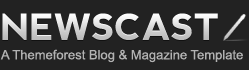
<style>
.page{position:relative;width:249px;height:70px;background:#222222}
.page>*{position:absolute;margin:0}
.t1{font:36px "nevis-Bold";text-transform:uppercase}
.t2{font:13px/24px "ArialMT";color:#b2b2b2}
</style>
<div class="page">
<p class="t1" style="left:2px;top:13px;width:216px;height:27px">Newscast</p>
<p class="t2" style="left:0px;top:49px;width:243px;height:14px">A Themeforest Blog &amp; Magazine Template<br>A M</p>
</div>
